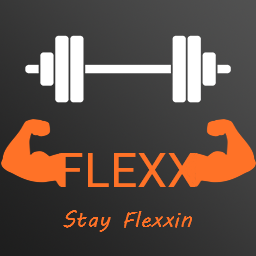
<style>
.page{position:relative;width:256px;height:256px}
.page>*{position:absolute;margin:0}
.t1{font:47.8px "Roboto-Regular";color:#ff7227}
.t2{font:22.4px "MVBoli";color:#ff7227}
</style>
<div class="page">
<p class="t1" style="left:61px;top:153px;width:135px;height:34px">FLEXX</p>
<p class="t2" style="left:63px;top:210px;width:129px;height:22px">Stay Flexxin</p>
</div>
